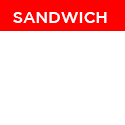
<style>
.page{position:relative;width:125px;height:125px;background:#ffffff}
.page>*{position:absolute;margin:0}
.t1{font:16px "GothamMedium";color:#ffffff}
</style>
<div class="page">
<p class="t1" style="left:13px;top:12px;width:94px;height:11px">SANDWICH</p>
</div>
